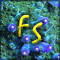
<style>
.page{position:relative;width:60px;height:60px}
.page>*{position:absolute;margin:0}
.t1{font:29.2px "Mistral"}
</style>
<div class="page">
<p class="t1" style="left:17px;top:15px;width:12px;height:22px">F</p>
<p class="t1" style="left:32px;top:22px;width:11px;height:22px">S</p>
</div>
